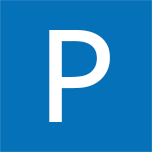
<style>
.page{position:relative;width:152px;height:152px;background:#0571b9}
.page>*{position:absolute;margin:0}
.t1{font:126.7px "Verdana";color:#ffffff}
</style>
<div class="page">
<p class="t1" style="left:49px;top:30px;width:61px;height:92px">P</p>
</div>
